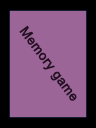
<style>
.page{position:relative;width:96px;height:128px;background:#9b6597}
.page>*{position:absolute;margin:0}
.t1{font:13.3px "ArialMT";color:#240f23;font-weight:bold}
</style>
<div class="page">
<p class="t1" style="left:19px;top:25px;width:58px;height:76px;rotate:53deg">Memory game</p>
</div>
